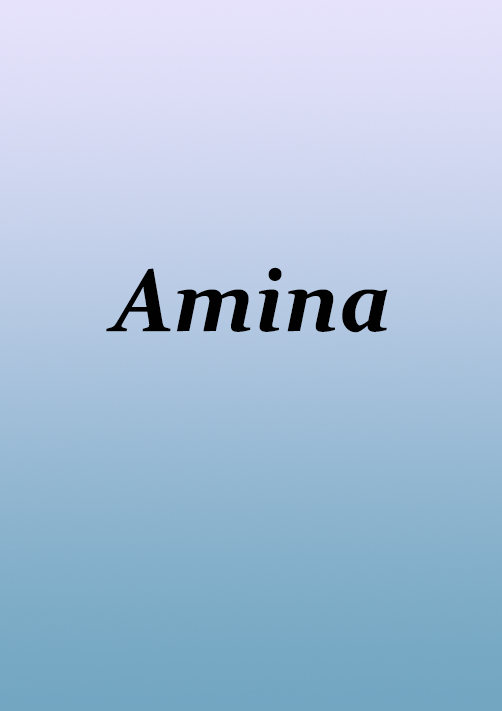
<style>
.page{position:relative;width:502px;height:711px}
.page>*{position:absolute;margin:0}
.t1{font:90px "Constantia-BoldItalic";color:#010101}
</style>
<div class="page">
<p class="t1" style="left:106px;top:267px;width:282px;height:66px">Amina</p>
</div>
